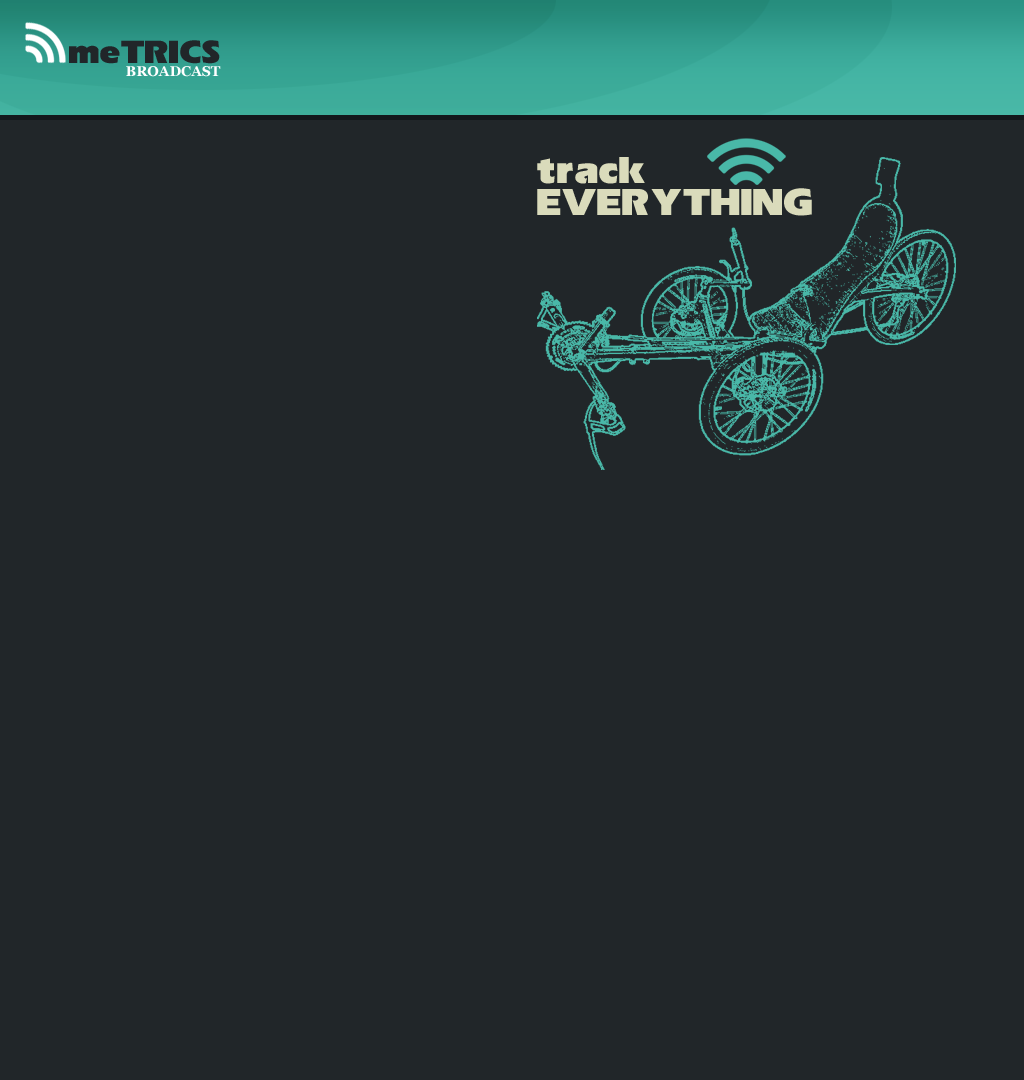
<style>
.page{position:relative;width:1024px;height:1080px;background:#212629}
.page>*{position:absolute;margin:0}
.t1{font:36px "ErikaBold";color:#212629}
.t2{font:14px "Georgia-Bold";color:#ffffff;text-transform:uppercase}
.t3{font:42px/32px "ErikaBold";color:#dadbbb}
</style>
<div class="page">
<p class="t1" style="left:69px;top:40px;width:151px;height:24px">meTRICS</p>
<p class="t2" style="left:126px;top:66px;width:95px;height:11px">Broadcast</p>
<p class="t3" style="left:537px;top:157px;width:275px;height:59px">track<br>EVERYTHING</p>
</div>
